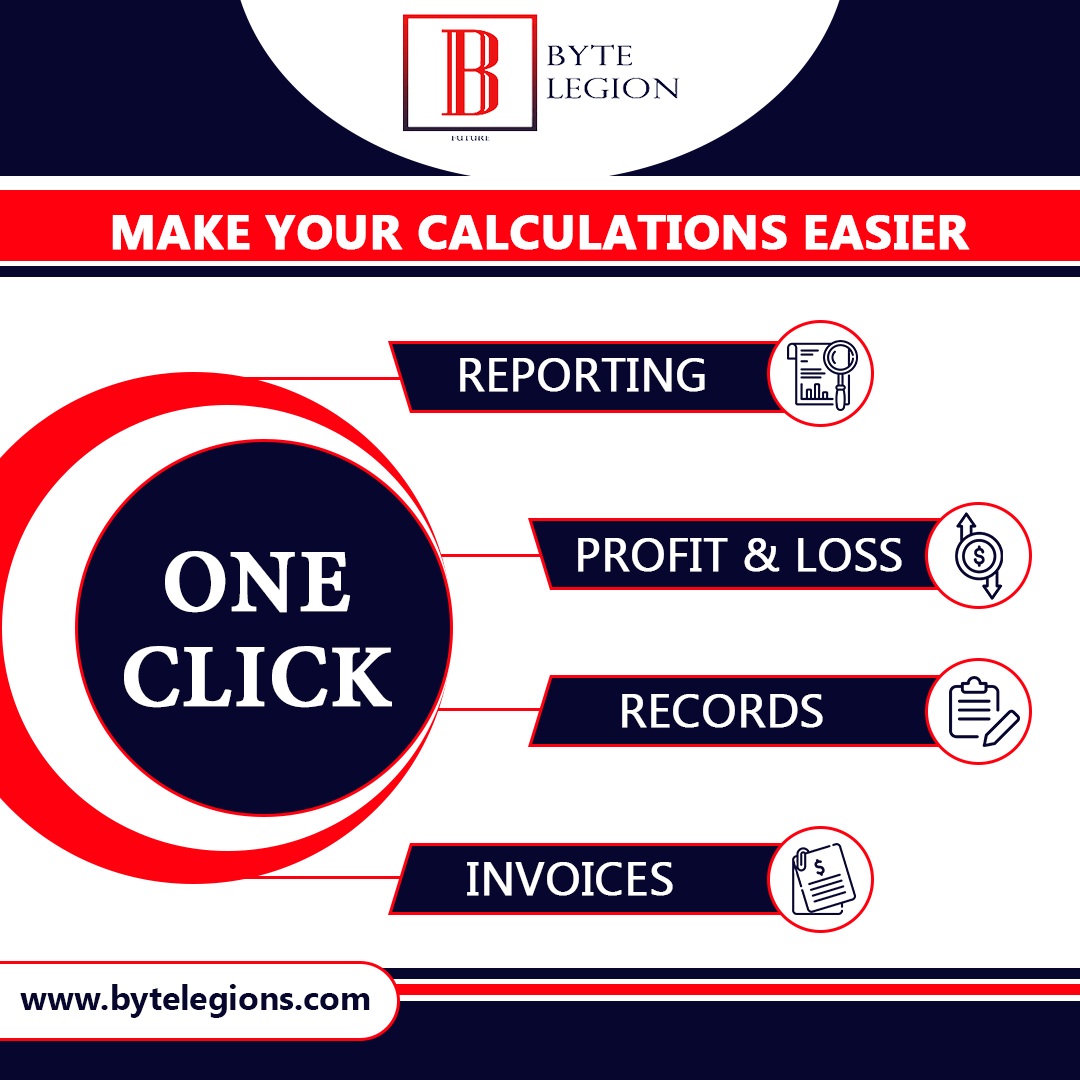
<style>
.page{position:relative;width:1080px;height:1080px;background:#ffffff}
.page>*{position:absolute;margin:0}
.t1{font:48px "MyanmarText-Bold";color:#ffffff;text-transform:uppercase;font-weight:bold}
.t2{font:46px "MyanmarText";color:#ffffff;text-transform:uppercase;font-weight:bold}
.t3{font:96.2px/95.2px "AdobeGurmukhi-Bold";letter-spacing:0.01em;color:#ffffff;text-transform:uppercase;font-weight:bold}
.t4{font:33.6px "MyanmarText-Bold";color:#07062e}
</style>
<div class="page">
<p class="t1" style="left:112px;top:215px;width:858px;height:35px">Make your calculations easier</p>
<p class="t2" style="left:460px;top:358px;width:245px;height:34px">Reporting</p>
<p class="t2" style="left:578px;top:538px;width:324px;height:34px">Profit &amp; Loss</p>
<p class="t3" style="left:124px;top:551px;width:268px;height:157px;text-align:center">One<br>Click</p>
<p class="t2" style="left:622px;top:694px;width:201px;height:34px">Records</p>
<p class="t2" style="left:467px;top:862px;width:206px;height:34px">Invoices</p>
<p class="t4" style="left:20px;top:984px;width:350px;height:34px">www.bytelegions.com</p>
</div>
